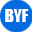
<style>
.page{position:relative;width:32px;height:32px;background:#026cdf}
.page>*{position:absolute;margin:0}
.t1{font:16.6px "Impact";color:#fffefe}
</style>
<div class="page">
<p class="t1" style="left:5px;top:9px;width:24px;height:13px">BYF</p>
</div>
